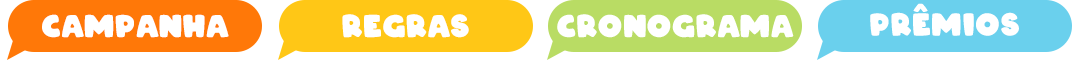
<style>
.page{position:relative;width:1076px;height:61px;background:#ffffff}
.page>*{position:absolute;margin:0}
.t1{font:11.1px "ARCO-Typography-Regular";letter-spacing:0.035em;color:#ffffff;scale:1.51 1}
.t2{font:30px "ARCO-Typography-Regular";letter-spacing:0.035em;color:#ffffff}
</style>
<div class="page">
<p class="t1" style="left:913px;top:3px;width:15px;height:9px;rotate:180deg">V</p>
<p class="t2" style="left:42px;top:14px;width:187px;height:24px">Campanha</p>
<p class="t2" style="left:342px;top:14px;width:127px;height:24px">REGRAS</p>
<p class="t2" style="left:557px;top:14px;width:237px;height:24px">CRONOGRAMA</p>
<p class="t2" style="left:870px;top:12px;width:149px;height:24px">PREMIOS</p>
</div>
